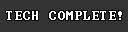
<style>
.page{position:relative;width:128px;height:32px;background:#333333}
.page>*{position:absolute;margin:0}
.t1{font:12px "Terminal";letter-spacing:0.1em;color:#ffffff}
</style>
<div class="page">
<p class="t1" style="left:6px;top:11px;width:116px;height:9px">TECH COMPLETE!</p>
</div>
